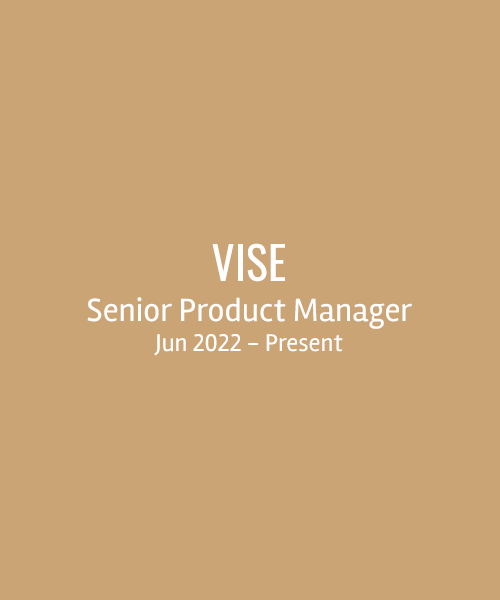
<style>
.page{position:relative;width:500px;height:600px;background:#cba475}
.page>*{position:absolute;margin:0}
.t1{font:33.3px "Rambla-Regular";color:#ffffff}
.t2{font:45.8px "Oswald-Regular";color:#ffffff}
.t3{font:25px "Rambla-Regular";color:#ffffff}
</style>
<div class="page">
<p class="t1" style="left:87px;top:243px;width:325px;height:113px;text-align:center"><span class="t2">VISE<br></span>Senior Product Manager<br><span class="t3">Jun 2022 - Present</span></p>
</div>
